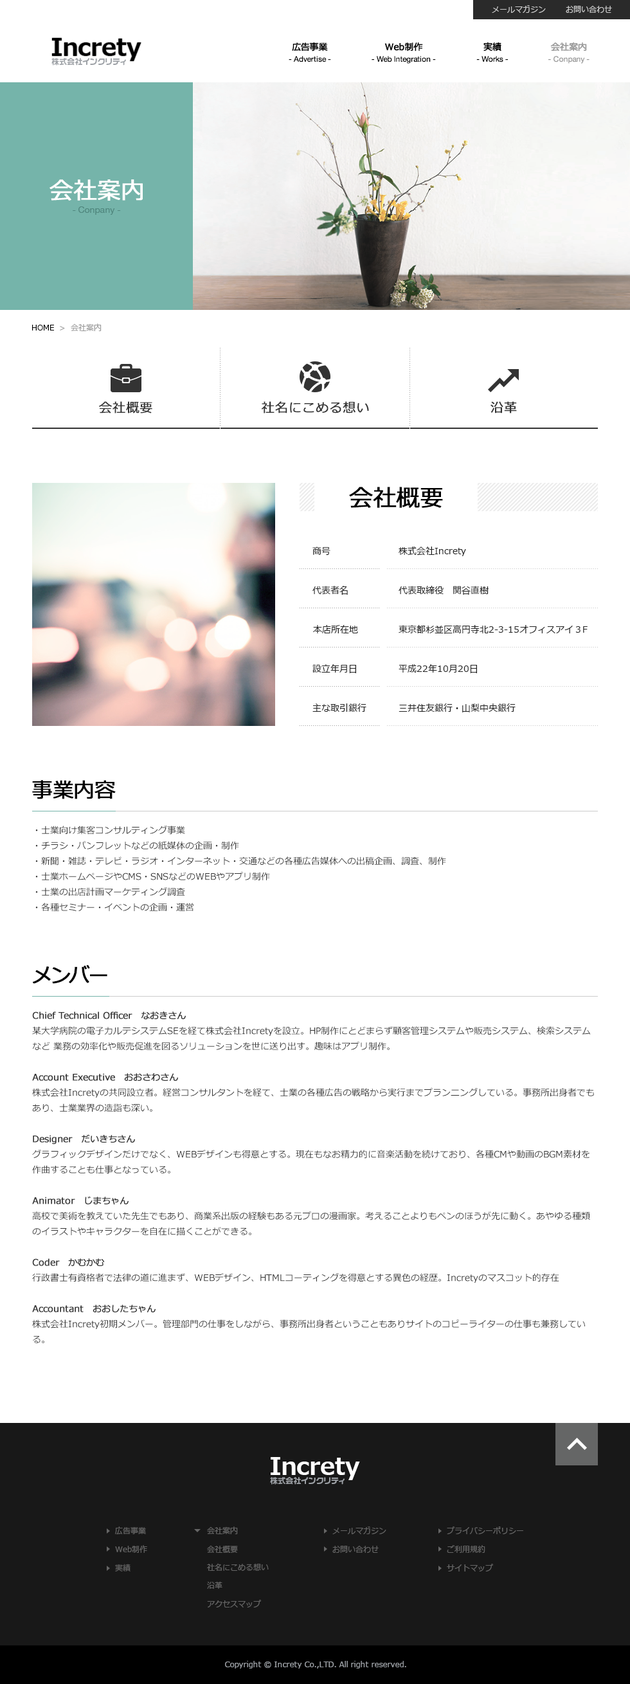
<style>
.page{position:relative;width:630px;height:1684px;background:#ffffff}
.page>*{position:absolute;margin:0}
.t1{font:7.7px "Meiryo";color:#cccccc}
.t2{font:23.5px "Meiryo-Bold";color:#000000}
.t3{font:9px "Meiryo";color:#000000;font-weight:bold}
.t4{font:9px "Meiryo";color:#999999;font-weight:bold}
.t5{font:7.7px "VD-LogoMaru-Extra-G";color:#9da1a6}
.t6{font:7.7px "HelveticaNeue";color:#000000}
.t7{font:7.7px "HelveticaNeue";color:#999999}
.t8{font:23.1px "Meiryo";color:#ffffff;font-weight:bold}
.t9{font:9px "HelveticaNeue";color:#4f867d}
.t10{font:7.7px "Meiryo";color:#989898}
.t11{font:7.7px "Meiryo";color:#000000}
.t12{font:12.9px "Meiryo";color:#333333;font-weight:bold}
.t13{font:23.1px "Meiryo";color:#000000;font-weight:bold}
.t14{font:9px "Meiryo";color:#232323}
.t15{font:20.6px "Meiryo";color:#000000;font-weight:bold}
.t16{font:9px/15.4px "Meiryo";color:#333333}
.t17{font:9px/15.4px "Meiryo";color:#333333;font-weight:bold}
.t18{font:23.5px "Meiryo-Bold";color:#ffffff}
.t19{font:7.7px "Meiryo";color:#666666}
.t20{font:7.7px "Verdana";color:#9da1a6}
</style>
<div class="page">
<p class="t1" style="left:492px;top:5px;width:54px;height:8px">メールマガジン</p>
<p class="t1" style="left:566px;top:6px;width:46px;height:7px">お問い合わせ</p>
<p class="t2" style="left:52px;top:38px;width:89px;height:23px">Increty</p>
<p class="t3" style="left:292px;top:42px;width:36px;height:9px">広告事業</p>
<p class="t3" style="left:384px;top:42px;width:39px;height:9px">Web制作</p>
<p class="t3" style="left:483px;top:42px;width:18px;height:9px">実績</p>
<p class="t4" style="left:550px;top:42px;width:37px;height:9px">会社案内</p>
<p class="t5" style="left:51px;top:58px;width:75px;height:8px">株式会社インクリティ</p>
<p class="t6" style="left:289px;top:56px;width:42px;height:6px">- Advertise -</p>
<p class="t6" style="left:372px;top:56px;width:64px;height:8px">- Web Integration -</p>
<p class="t6" style="left:476px;top:56px;width:32px;height:6px">- Works -</p>
<p class="t7" style="left:548px;top:56px;width:42px;height:8px">- Conpany -</p>
<p class="t8" style="left:50px;top:179px;width:93px;height:22px">会社案内</p>
<p class="t9" style="left:73px;top:206px;width:48px;height:9px">- Conpany -</p>
<p class="t10" style="left:32px;top:323px;width:70px;height:8px"><span class="t11">HOME  </span>&gt;  会社案内</p>
<p class="t12" style="left:99px;top:401px;width:53px;height:12px">会社概要</p>
<p class="t12" style="left:262px;top:401px;width:107px;height:12px">社名にこめる想い</p>
<p class="t12" style="left:491px;top:401px;width:26px;height:12px">沿革</p>
<p class="t13" style="left:349px;top:487px;width:94px;height:21px">会社概要</p>
<p class="t14" style="left:312px;top:546px;width:18px;height:9px">商号</p>
<p class="t14" style="left:399px;top:546px;width:67px;height:10px">株式会社Increty</p>
<p class="t14" style="left:312px;top:586px;width:36px;height:9px">代表者名</p>
<p class="t14" style="left:399px;top:586px;width:90px;height:9px">代表取締役　関谷直樹</p>
<p class="t14" style="left:313px;top:625px;width:45px;height:8px">本店所在地</p>
<p class="t14" style="left:399px;top:625px;width:189px;height:9px">東京都杉並区高円寺北2-3-15オフィスアイ３F</p>
<p class="t14" style="left:312px;top:664px;width:44px;height:9px">設立年月日</p>
<p class="t14" style="left:399px;top:664px;width:78px;height:9px">平成22年10月20日</p>
<p class="t14" style="left:312px;top:703px;width:54px;height:9px">主な取引銀行</p>
<p class="t14" style="left:399px;top:703px;width:117px;height:9px">三井住友銀行・山梨中央銀行</p>
<p class="t15" style="left:32px;top:780px;width:84px;height:19px">事業内容</p>
<p class="t16" style="left:35px;top:825px;width:411px;height:87px">・士業向け集客コンサルティング事業<br>・チラシ・パンフレットなどの紙媒体の企画・制作<br>・新聞・雑誌・テレビ・ラジオ・インターネット・交通などの各種広告媒体への出稿企画、調査、制作<br>・士業ホームページやCMS・SNSなどのWEBやアプリ制作<br>・士業の出店計画マーケティング調査<br>・各種セミナー・イベントの企画・運営</p>
<p class="t15" style="left:33px;top:964px;width:74px;height:20px">メンバー</p>
<p class="t16" style="left:32px;top:1011px;width:562px;height:332px"><span class="t17">Chief Technical Officer　なおきさん<br></span>某大学病院の電子カルテシステムSEを経て株式会社Incretyを設立。HP制作にとどまらず顧客管理システムや販売システム、検索システムなど 業務の効率化や販売促進を図るソリューションを世に送り出す。趣味はアプリ制作。<br><br><span class="t17">Account Executive　おおさわさん<br></span>株式会社Incretyの共同設立者。経営コンサルタントを経て、士業の各種広告の戦略から実行までプランニングしている。事務所出身者でもあり、士業業界の造詣も深い。<br><br><span class="t17">Designer　だいきちさん<br></span>グラフィックデザインだけでなく、WEBデザインも得意とする。現在もなお精力的に音楽活動を続けており、各種CMや動画のBGM素材を作曲することも仕事となっている。<br><br><span class="t17">Animator　じまちゃん<br></span>高校で美術を教えていた先生でもあり、商業系出版の経験もある元プロの漫画家。考えることよりもペンのほうが先に動く。あやゆる種類のイラストやキャラクターを自在に描くことができる。<br><br><span class="t17">Coder　かむかむ<br></span>行政書士有資格者で法律の道に進まず、WEBデザイン、HTMLコーティングを得意とする異色の経歴。Incretyのマスコット的存在<br><br><span class="t17">Accountant　おおしたちゃん<br></span>株式会社Increty初期メンバー。管理部門の仕事をしながら、事務所出身者ということもありサイトのコピーライターの仕事も兼務している。</p>
<p class="t18" style="left:271px;top:1457px;width:89px;height:23px">Increty</p>
<p class="t5" style="left:270px;top:1477px;width:75px;height:7px">株式会社インクリティ</p>
<p class="t19" style="left:115px;top:1526px;width:31px;height:8px">広告事業</p>
<p class="t19" style="left:207px;top:1526px;width:31px;height:8px">会社案内</p>
<p class="t19" style="left:332px;top:1526px;width:54px;height:8px">メールマガジン</p>
<p class="t19" style="left:447px;top:1526px;width:76px;height:8px">プライバシーポリシー</p>
<p class="t19" style="left:115px;top:1545px;width:32px;height:8px">Web制作</p>
<p class="t19" style="left:207px;top:1545px;width:31px;height:8px">会社概要</p>
<p class="t19" style="left:332px;top:1545px;width:47px;height:8px">お問い合わせ</p>
<p class="t19" style="left:447px;top:1545px;width:38px;height:8px">ご利用規約</p>
<p class="t19" style="left:115px;top:1563px;width:15px;height:8px">実績</p>
<p class="t19" style="left:207px;top:1563px;width:62px;height:8px">社名にこめる想い</p>
<p class="t19" style="left:447px;top:1563px;width:46px;height:8px">サイトマップ</p>
<p class="t19" style="left:207px;top:1581px;width:15px;height:8px">沿革</p>
<p class="t19" style="left:207px;top:1599px;width:54px;height:8px">アクセスマップ</p>
<p class="t20" style="left:225px;top:1661px;width:181px;height:7px">Copyright © Increty Co.,LTD. All right reserved.</p>
</div>
